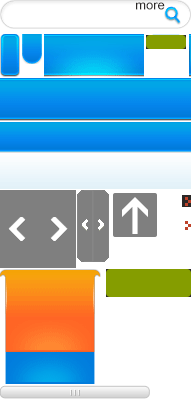
<style>
.page{position:relative;width:191px;height:399px;background:#ffffff}
.page>*{position:absolute;margin:0}
.t1{font:13px "ArialMT";color:#2b2726}
</style>
<div class="page">
<p class="t1" style="left:136px;top:2px;width:29px;height:8px">more</p>
</div>
